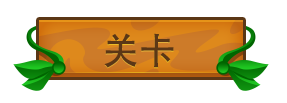
<style>
.page{position:relative;width:287px;height:103px;background:#ffffff}
.page>*{position:absolute;margin:0}
.t1{font:36px "AdobeHeitiStd-Regular";letter-spacing:0.025em;color:#5b3716}
</style>
<div class="page">
<p class="t1" style="left:104px;top:33px;width:70px;height:35px">关卡</p>
</div>
